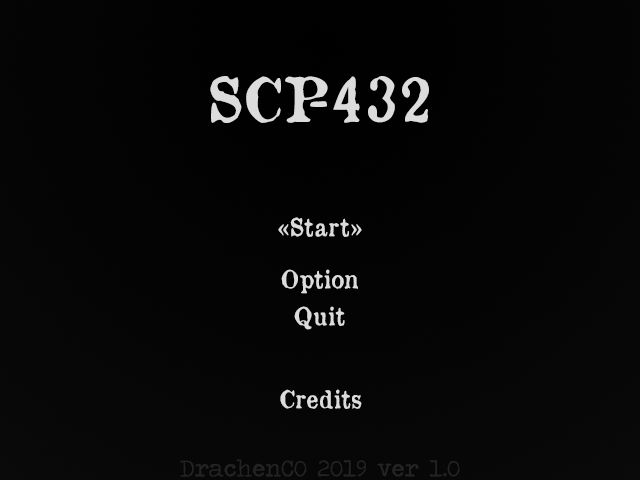
<style>
.page{position:relative;width:640px;height:480px}
.page>*{position:absolute;margin:0}
.t1{font:60px "OldNewspaperTypes";color:#dcdcdc}
.t2{font:24px "OldNewspaperTypes";color:#dcdcdc}
.t3{font:24px "TravelingTypewriter";color:#232323}
</style>
<div class="page">
<p class="t1" style="left:210px;top:76px;width:219px;height:47px">SCP-432</p>
<p class="t2" style="left:278px;top:217px;width:84px;height:20px">«Start»</p>
<p class="t2" style="left:281px;top:269px;width:77px;height:25px">Option</p>
<p class="t2" style="left:294px;top:306px;width:51px;height:24px">Quit</p>
<p class="t2" style="left:280px;top:389px;width:82px;height:20px">Credits</p>
<p class="t3" style="left:180px;top:459px;width:280px;height:18px">DrachenCO 2019 ver 1.0</p>
</div>
